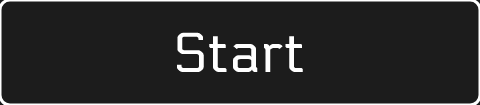
<style>
.page{position:relative;width:480px;height:105px;background:#1c1c1c}
.page>*{position:absolute;margin:0}
.t1{font:56px "Electrolize-Regular";color:#ffffff}
</style>
<div class="page">
<p class="t1" style="left:176px;top:32px;width:127px;height:40px">Start</p>
</div>
